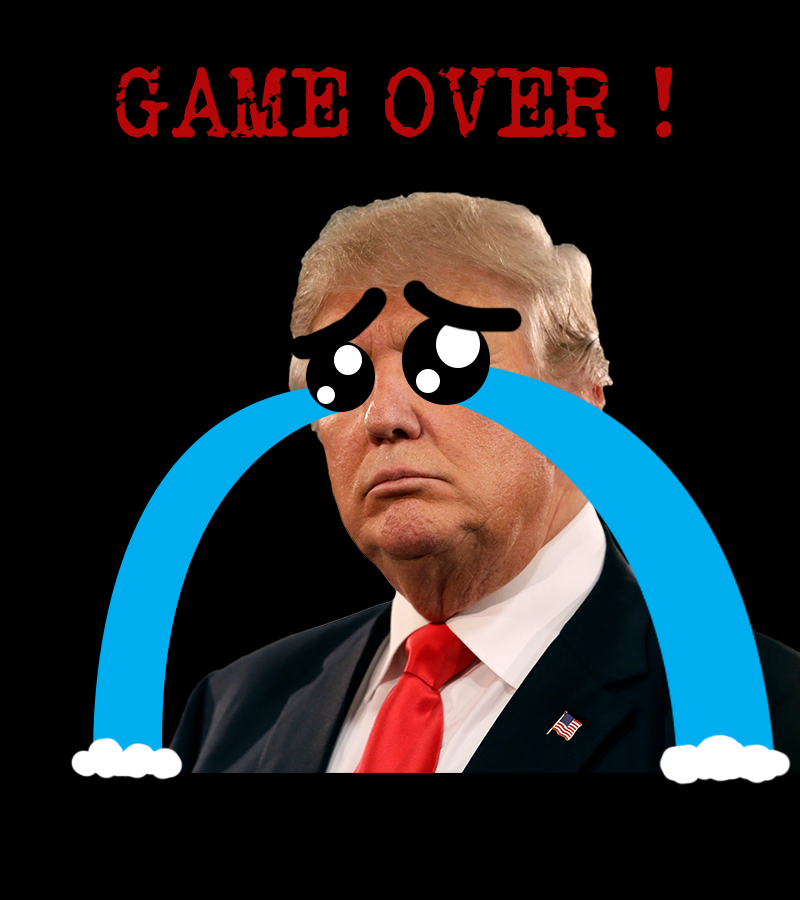
<style>
.page{position:relative;width:800px;height:900px;background:#000000}
.page>*{position:absolute;margin:0}
.t1{font:100px "VeteranTypewriter";color:#b50707}
</style>
<div class="page">
<p class="t1" style="left:116px;top:65px;width:557px;height:73px">GAME OVER !</p>
</div>
